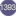
<style>
.page{position:relative;width:16px;height:16px}
.page>*{position:absolute;margin:0}
.t1{font:7.9px "HelveticaNeue";letter-spacing:-0.05em;color:#cccccc}
</style>
<div class="page">
<p class="t1" style="left:0px;top:4px;width:16px;height:7px">1393</p>
</div>
